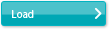
<style>
.page{position:relative;width:110px;height:30px;background:#4dc2cb}
.page>*{position:absolute;margin:0}
.t1{font:11px "MyriadPro-Regular";color:#ffffff}
</style>
<div class="page">
<p class="t1" style="left:12px;top:10px;width:22px;height:8px">Load</p>
</div>
